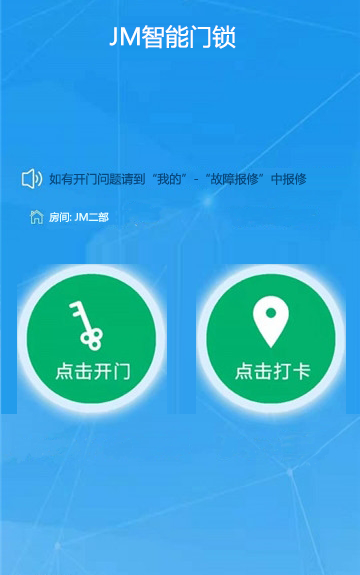
<style>
.page{position:relative;width:360px;height:575px}
.page>*{position:absolute;margin:0}
.t1{font:23.5px "MicrosoftYaHei";color:#fdfdfd}
.t2{font:12px "MicrosoftYaHei";color:#07487e}
.t3{font:10px "MicrosoftYaHei";color:#e1ffff}
</style>
<div class="page">
<p class="t1" style="left:109px;top:25px;width:127px;height:24px">JM智能门锁</p>
<p class="t2" style="left:49px;top:173px;width:258px;height:12px">如有开门问题请到“我的”-“故障报修”中报修</p>
<p class="t3" style="left:49px;top:212px;width:60px;height:10px">房间: JM二部</p>
</div>
